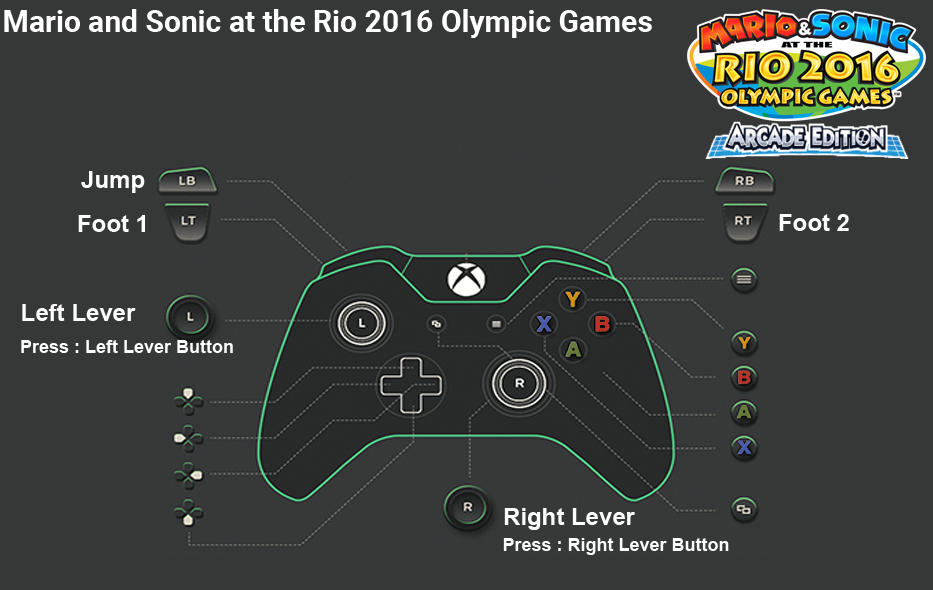
<style>
.page{position:relative;width:933px;height:590px;background:#363838}
.page>*{position:absolute;margin:0}
.t1{font:30px "Roboto-Bold";color:#ffffff}
.t2{font:24px "Arial-BoldMT";color:#fefefe}
.t3{font:18px "Arial-BoldMT";color:#fefefe}
</style>
<div class="page">
<p class="t1" style="left:4px;top:9px;width:648px;height:29px">Mario and Sonic at the Rio 2016 Olympic Games</p>
<p class="t2" style="left:81px;top:171px;width:64px;height:22px">Jump</p>
<p class="t2" style="left:78px;top:215px;width:67px;height:17px">Foot 1</p>
<p class="t2" style="left:779px;top:214px;width:70px;height:17px">Foot 2</p>
<p class="t2" style="left:22px;top:304px;width:114px;height:17px">Left Lever</p>
<p class="t3" style="left:21px;top:340px;width:212px;height:13px">Press : Left Lever Button</p>
<p class="t2" style="left:504px;top:508px;width:131px;height:22px">Right Lever</p>
<p class="t3" style="left:503px;top:538px;width:226px;height:17px">Press : Right Lever Button</p>
</div>
